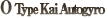
<style>
.page{position:relative;width:108px;height:18px;background:#ffffff}
.page>*{position:absolute;margin:0}
.t1{font:14px "RyuminPro-ExBold";letter-spacing:-0.14em;color:#4a3f32;font-weight:bold;scale:0.86 1}
.t2{font:18px "RyuminPro-ExBold";letter-spacing:-0.14em;color:#4a3f32;font-weight:bold;scale:0.86 1}
</style>
<div class="page">
<p class="t1" style="left:0px;top:0px;width:106px;height:17px"><span class="t2">O </span>Type Kai Autogyro</p>
</div>
